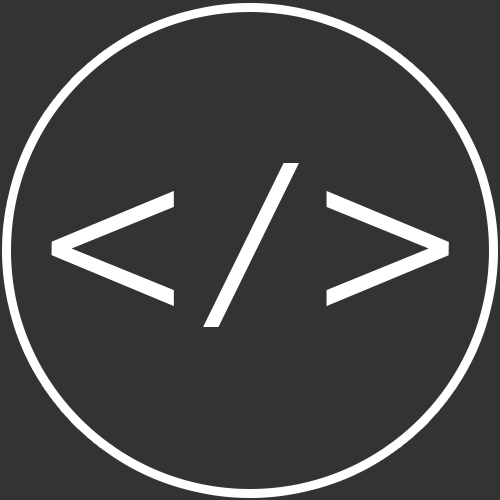
<style>
.page{position:relative;width:500px;height:500px;background:#333333}
.page>*{position:absolute;margin:0}
.t1{font:229.6px "CalistoMT";color:#ffffff}
</style>
<div class="page">
<p class="t1" style="left:51px;top:163px;width:398px;height:164px">&lt;/&gt;</p>
</div>
